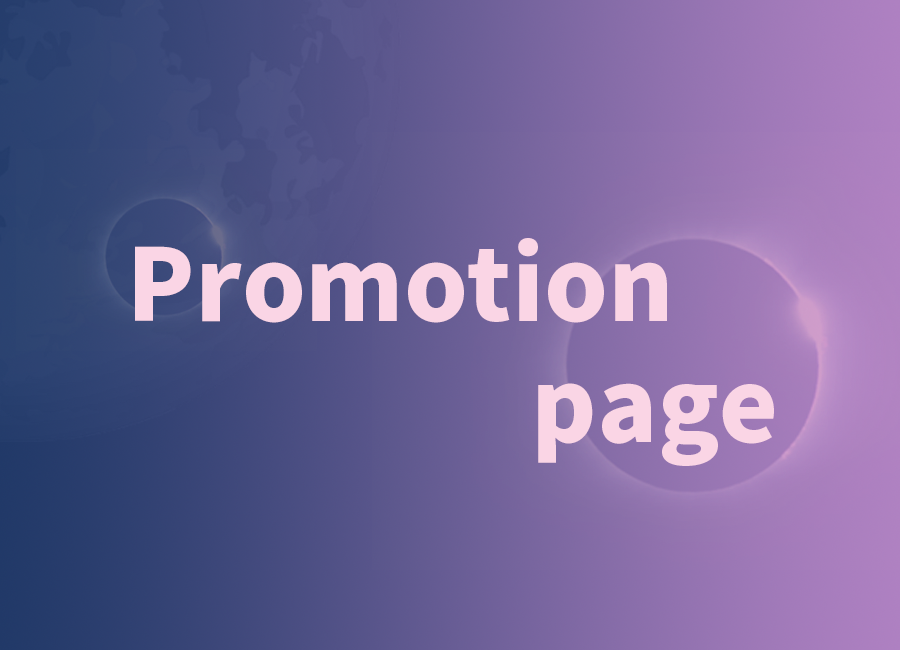
<style>
.page{position:relative;width:900px;height:650px}
.page>*{position:absolute;margin:0}
.t1{font:100px "NotoSansKR-Black";color:#fad5e5}
</style>
<div class="page">
<p class="t1" style="left:135px;top:238px;width:532px;height:85px">Promotion</p>
<p class="t1" style="left:538px;top:383px;width:236px;height:83px">page</p>
</div>
